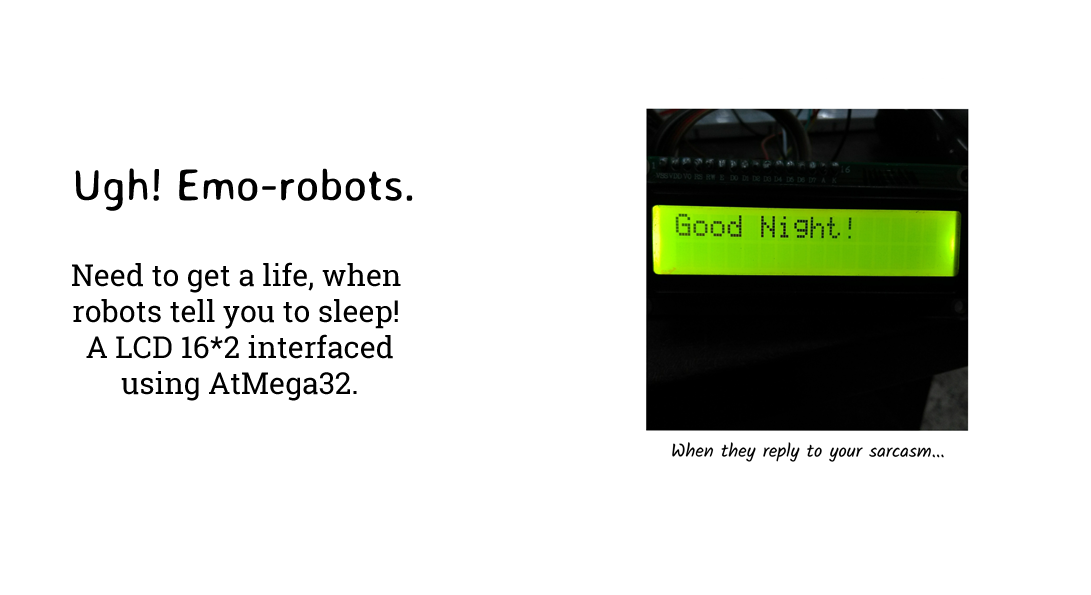
<style>
.page{position:relative;width:1091px;height:595px;background:#ffffff}
.page>*{position:absolute;margin:0}
.t1{font:45px "AveriaSansLibre-Regular";color:#000000}
.t2{font:30px "RobotoSlab-Regular";color:#000000}
</style>
<div class="page">
<p class="t1" style="left:75px;top:168px;width:338px;height:43px">Ugh! Emo-robots.</p>
<p class="t2" style="left:72px;top:262px;width:329px;height:139px;text-align:center">Need to get a life, when <br>robots tell you to sleep! <br>A LCD 16*2 interfaced<br>using AtMega32.</p>
</div>
